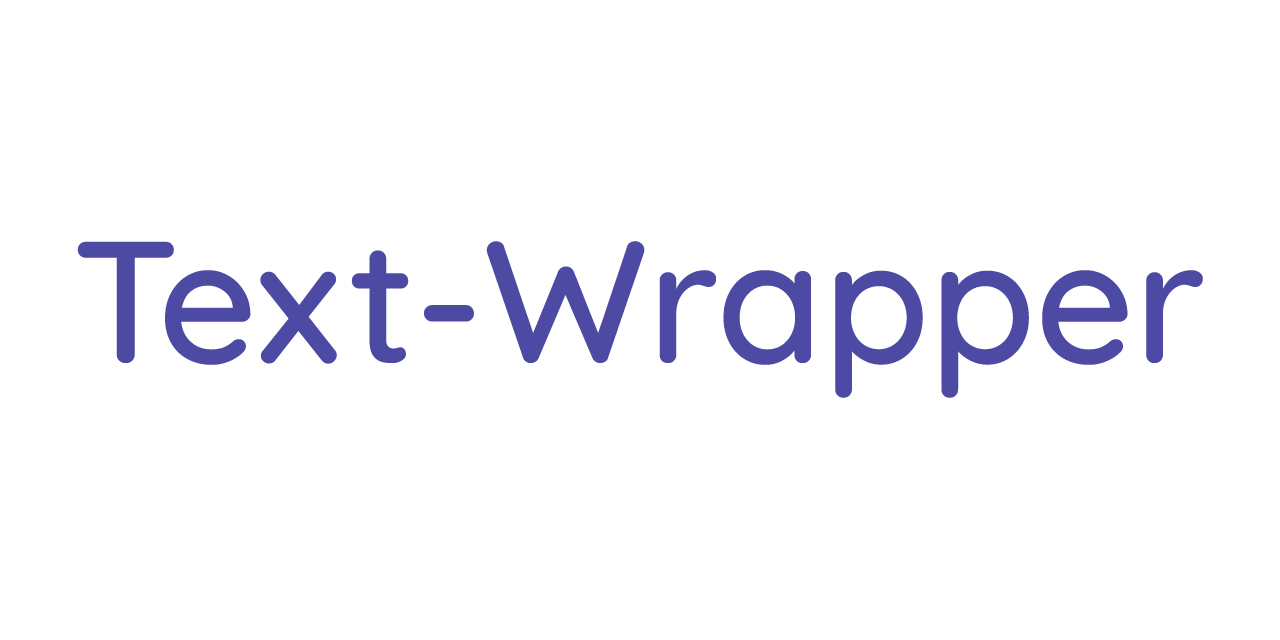
<style>
.page{position:relative;width:1280px;height:640px;background:#ffffff}
.page>*{position:absolute;margin:0}
.t1{font:173px "Quicksand-Medium";color:#4d4aa3}
</style>
<div class="page">
<p class="t1" style="left:77px;top:241px;width:1126px;height:157px">Text-Wrapper</p>
</div>
